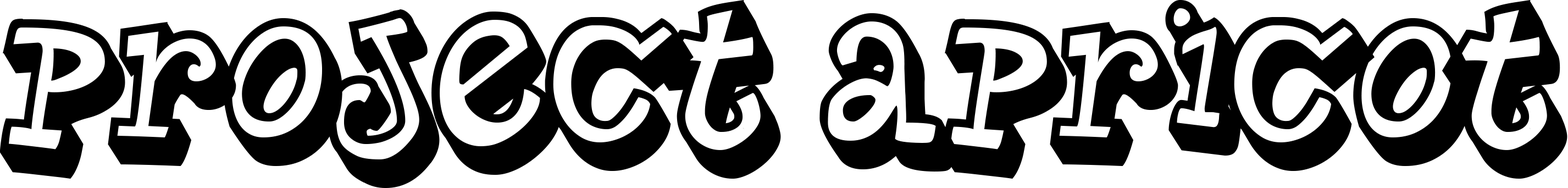
<style>
.page{position:relative;width:1568px;height:188px;background:#ffffff}
.page>*{position:absolute;margin:0}
.t1{font:164.9px "PlanetBenson2";color:#000000}
</style>
<div class="page">
<p class="t1" style="left:0px;top:0px;width:1567px;height:188px">Project Apricot</p>
</div>
